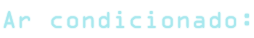
<style>
.page{position:relative;width:254px;height:38px;background:#ffffff}
.page>*{position:absolute;margin:0}
.t1{font:22px "OCRAStd";color:#a8e8ee}
</style>
<div class="page">
<p class="t1" style="left:3px;top:11px;width:246px;height:17px">Ar condicionado:</p>
</div>
